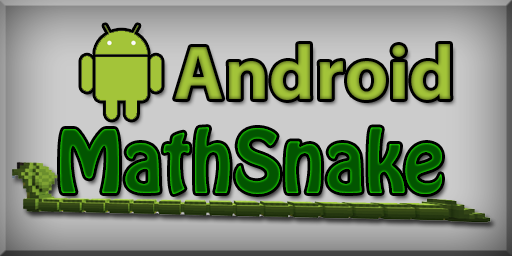
<style>
.page{position:relative;width:512px;height:256px}
.page>*{position:absolute;margin:0}
.t1{font:77px "MyriadPro-Bold";color:#a3c439}
.t2{font:77px "HoboStd";color:#025500}
</style>
<div class="page">
<p class="t1" style="left:175px;top:44px;width:276px;height:56px">Android</p>
<p class="t2" style="left:60px;top:127px;width:382px;height:67px">MathSnake</p>
</div>
